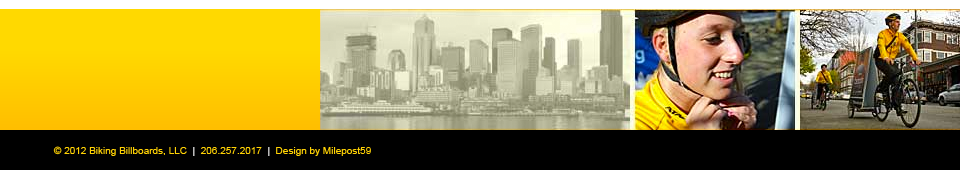
<style>
.page{position:relative;width:960px;height:170px;background:#000000}
.page>*{position:absolute;margin:0}
.t1{font:10px "ArialMT";color:#ffd204}
.t2{font:10px "ArialMT";color:#ffffff}
</style>
<div class="page">
<p class="t1" style="left:53px;top:146px;width:318px;height:10px">© 2012 Biking Billboards, LLC  <span class="t2">|  </span>206.257.2017  <span class="t2">| </span> Design by Milepost59</p>
</div>
